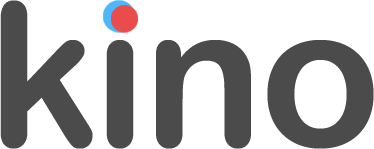
<style>
.page{position:relative;width:374px;height:149px;background:#ffffff}
.page>*{position:absolute;margin:0}
.t1{font:200px "ArialRoundedMTBold";color:#4c4b4b}
</style>
<div class="page">
<p class="t1" style="left:0px;top:0px;width:374px;height:149px">kino</p>
</div>
